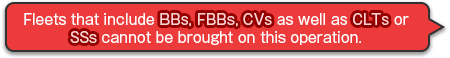
<style>
.page{position:relative;width:450px;height:58px;background:#ed3b3b}
.page>*{position:absolute;margin:0}
.t1{font:14px/18px "GothicMB101Pro-Regular";color:#ffffff}
.t2{font:14px/18px "GothicMB101Pro-Regular";color:#ffd3d3}
</style>
<div class="page">
<p class="t1" style="left:24px;top:13px;width:385px;height:32px;text-align:center">Fleets that include <span class="t2">BBs, FBBs, CVs</span> as well as <span class="t2">CLTs</span> or<br><span class="t2">SSs</span> cannot be brought on this operation.</p>
<p class="t1" style="left:24px;top:13px;width:385px;height:32px;text-align:center">Fleets that include <span class="t2">BBs, FBBs, CVs</span> as well as <span class="t2">CLTs</span> or<br><span class="t2">SSs</span> cannot be brought on this operation.</p>
</div>
